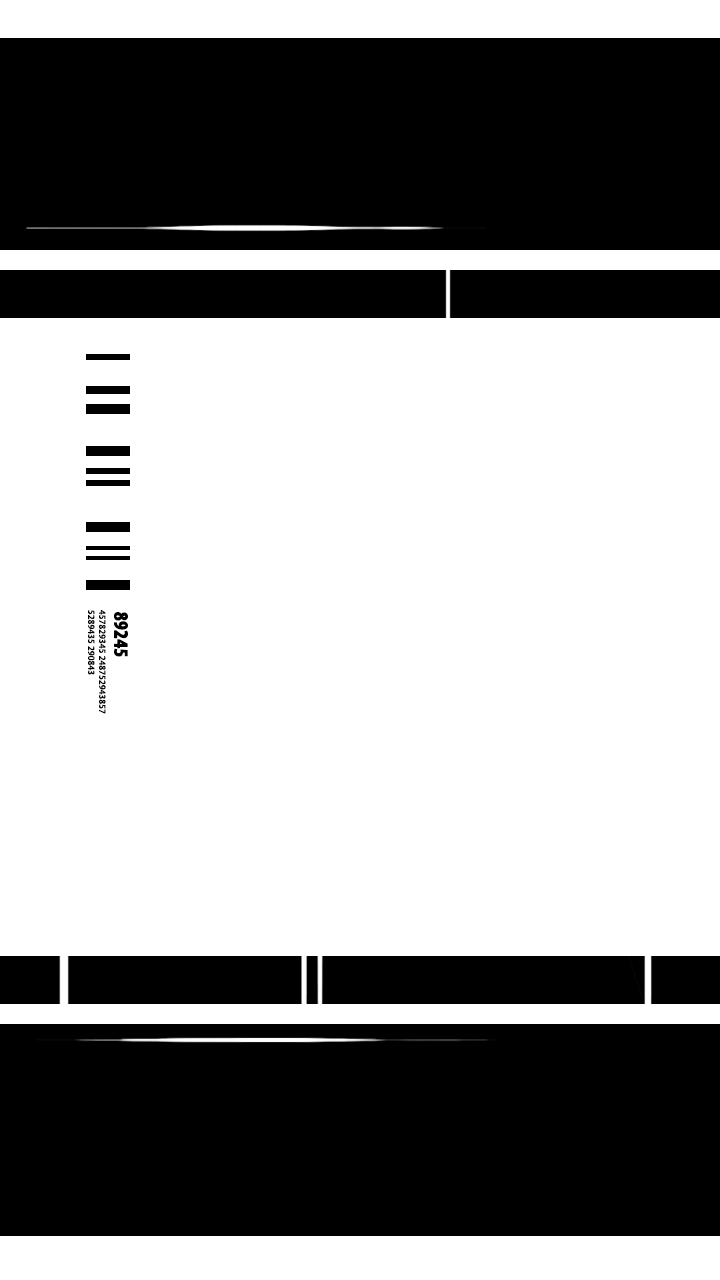
<style>
.page{position:relative;width:720px;height:1280px;background:#ffffff}
.page>*{position:absolute;margin:0}
.t1{font:9.2px "MyriadPro-Regular";color:#000000;font-weight:bold}
.t2{font:20px "MyriadPro-BoldCond";color:#000000;font-weight:bold}
</style>
<div class="page">
<p class="t1" style="left:88px;top:610px;width:18px;height:104px;rotate:90deg">457829345 248752943857<br>5289435 290843</p>
<p class="t2" style="left:114px;top:612px;width:14px;height:45px;rotate:90deg">89245</p>
</div>
